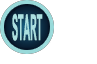
<style>
.page{position:relative;width:97px;height:64px;background:#ffffff}
.page>*{position:absolute;margin:0}
.t1{font:36px "ArialNarrow-Bold";color:#abe0e0;scale:0.31 1}
</style>
<div class="page">
<p class="t1" style="left:12px;top:13px;width:31px;height:28px">START</p>
</div>
